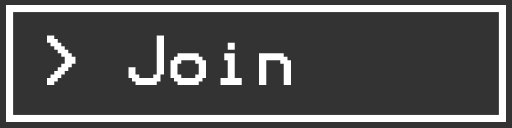
<style>
.page{position:relative;width:512px;height:128px;background:#333333}
.page>*{position:absolute;margin:0}
.t1{font:56.5px "Terminal";color:#ffffff}
</style>
<div class="page">
<p class="t1" style="left:47px;top:35px;width:244px;height:50px">&gt; Join</p>
</div>
